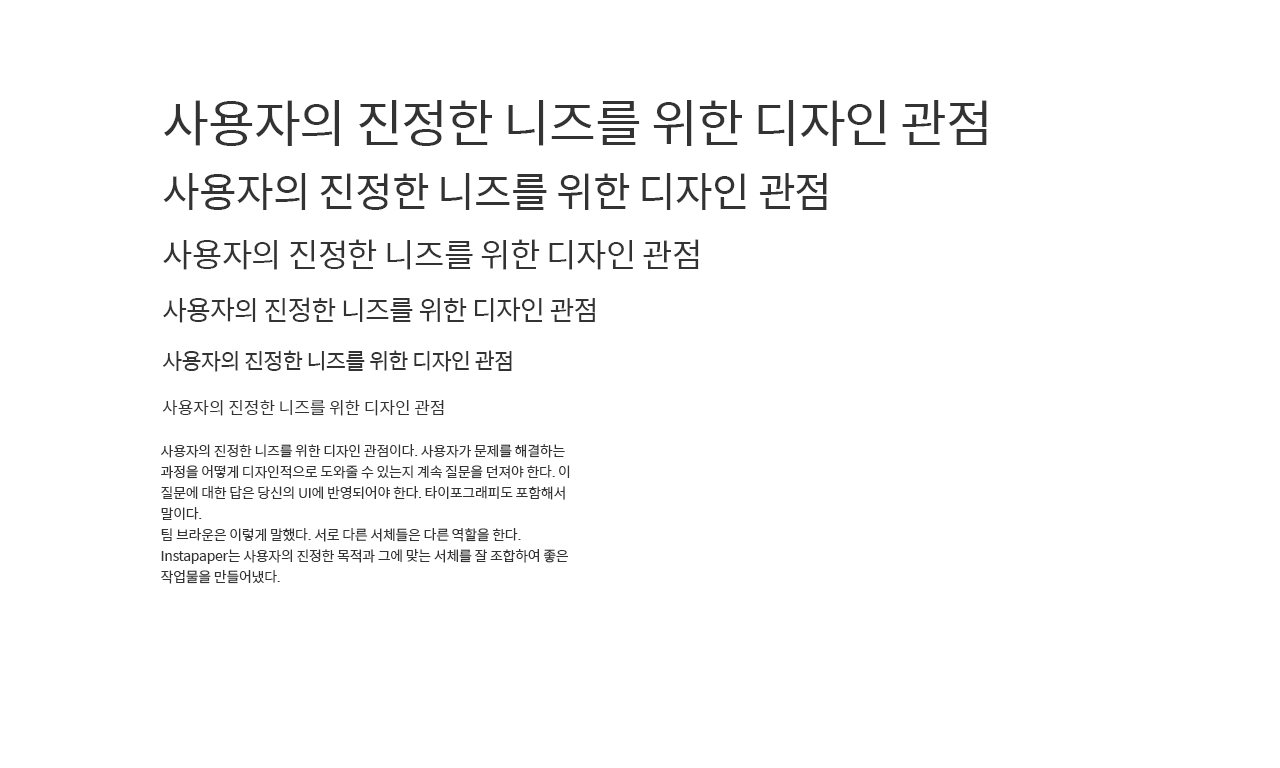
<style>
.page{position:relative;width:1280px;height:768px;background:#ffffff}
.page>*{position:absolute;margin:0}
.t1{font:50.9px "SpoqaHanSans-Regular";letter-spacing:-0.02em;color:#333333}
.t2{font:41px "SpoqaHanSans-Regular";letter-spacing:-0.02em;color:#333333}
.t3{font:33.1px "SpoqaHanSans-Regular";letter-spacing:-0.02em;color:#333333}
.t4{font:26.7px "SpoqaHanSans-Regular";letter-spacing:-0.02em;color:#333333}
.t5{font:21.5px "SpoqaHanSans-Regular";letter-spacing:-0.02em;color:#333333}
.t6{font:17.4px "SpoqaHanSans-Regular";letter-spacing:-0.02em;color:#333333}
.t7{font:14px "SpoqaHanSans-Regular";letter-spacing:-0.02em;color:#333333}
</style>
<div class="page">
<p class="t1" style="left:164px;top:100px;width:823px;height:46px">사용자의 진정한 니즈를 위한 디자인 관점</p>
<p class="t2" style="left:163px;top:173px;width:664px;height:37px">사용자의 진정한 니즈를 위한 디자인 관점</p>
<p class="t3" style="left:163px;top:239px;width:536px;height:31px">사용자의 진정한 니즈를 위한 디자인 관점</p>
<p class="t4" style="left:163px;top:297px;width:432px;height:26px">사용자의 진정한 니즈를 위한 디자인 관점</p>
<p class="t5" style="left:162px;top:350px;width:350px;height:22px">사용자의 진정한 니즈를 위한 디자인 관점</p>
<p class="t6" style="left:162px;top:400px;width:282px;height:16px">사용자의 진정한 니즈를 위한 디자인 관점</p>
<p class="t7" style="left:161px;top:444px;width:409px;height:140px">사용자의 진정한 니즈를 위한 디자인 관점이다. 사용자가 문제를 해결하는 과정을 어떻게 디자인적으로 도와줄 수 있는지 계속 질문을 던져야 한다. 이 질문에 대한 답은 당신의 UI에 반영되어야 한다. 타이포그래피도 포함해서 말이다.<br>팀 브라운은 이렇게 말했다. 서로 다른 서체들은 다른 역할을 한다.<br>Instapaper는 사용자의 진정한 목적과 그에 맞는 서체를 잘 조합하여 좋은 작업물을 만들어냈다.</p>
</div>
